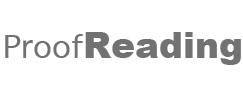
<style>
.page{position:relative;width:243px;height:96px;background:#ffffff}
.page>*{position:absolute;margin:0}
.t1{font:36px "Arial-Black";color:#727272}
.t2{font:44px "AppleSymbols";color:#727272}
</style>
<div class="page">
<p class="t1" style="left:5px;top:32px;width:236px;height:33px"><span class="t2">Proof</span>Reading</p>
</div>
